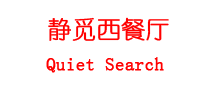
<style>
.page{position:relative;width:200px;height:100px;background:#ffffff}
.page>*{position:absolute;margin:0}
.t1{font:24px "YouYuan";color:#ff0000;font-weight:bold}
.t2{font:18.7px "YouYuan";color:#ff0000;font-weight:bold}
</style>
<div class="page">
<p class="t1" style="left:48px;top:17px;width:121px;height:24px">静觅西餐厅</p>
<p class="t2" style="left:46px;top:57px;width:118px;height:16px">Quiet Search</p>
</div>
